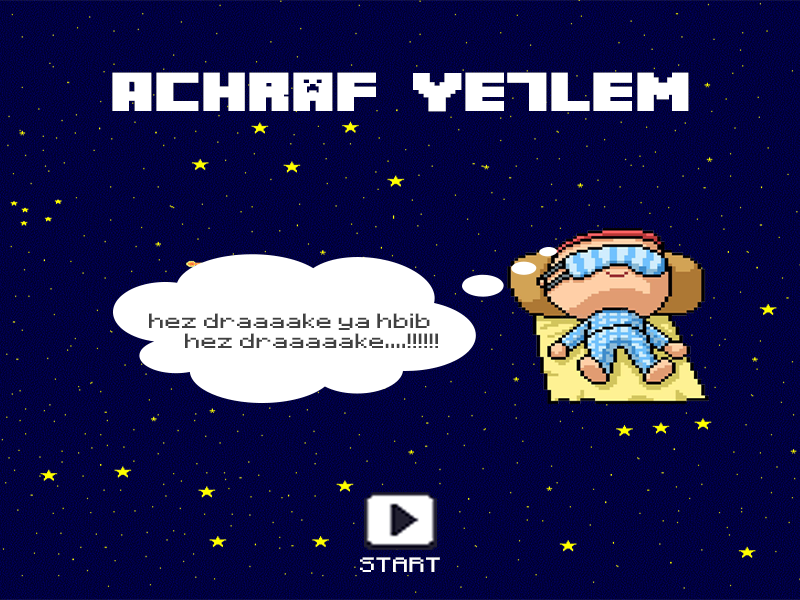
<style>
.page{position:relative;width:800px;height:600px}
.page>*{position:absolute;margin:0}
.t1{font:48.8px "Minecrafter";color:#ffffff;scale:1.33 1}
.t2{font:16.5px "Minecraft";color:#414141;scale:1.33 1}
.t3{font:16.5px "Minecraft";color:#ffffff;scale:1.33 1}
</style>
<div class="page">
<p class="t1" style="left:112px;top:72px;width:577px;height:40px">Achraf Ye7lem</p>
<p class="t2" style="left:149px;top:313px;width:289px;height:35px">hez draaaake ya hbib    hez draaaaake....!!!!!!</p>
<p class="t3" style="left:360px;top:557px;width:80px;height:15px">START</p>
</div>
